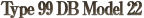
<style>
.page{position:relative;width:144px;height:18px;background:#ffffff}
.page>*{position:absolute;margin:0}
.t1{font:18px "RyuminPro-ExBold";letter-spacing:-0.1em;color:#4a3f32;font-weight:bold;scale:0.9 1}
</style>
<div class="page">
<p class="t1" style="left:0px;top:1px;width:143px;height:18px">Type 99 DB Model 22</p>
</div>
